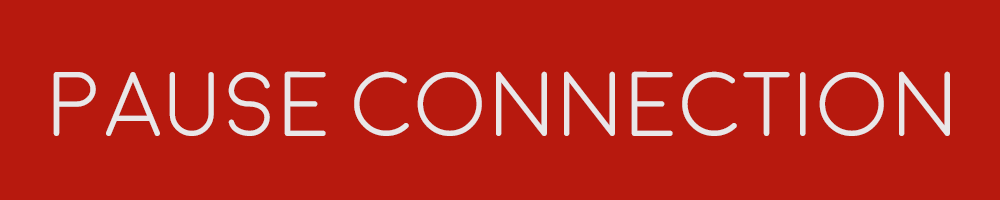
<style>
.page{position:relative;width:1000px;height:200px;background:#b7190e}
.page>*{position:absolute;margin:0}
.t1{font:91.4px "Moon-Light";color:#e9e7e8}
</style>
<div class="page">
<p class="t1" style="left:53px;top:71px;width:897px;height:65px">Pause Connection</p>
</div>
